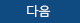
<style>
.page{position:relative;width:80px;height:23px;background:#0f4b81}
.page>*{position:absolute;margin:0}
.t1{font:12.5px "MalgunGothic";color:#ffffff}
</style>
<div class="page">
<p class="t1" style="left:27px;top:5px;width:24px;height:12px">다음</p>
</div>
